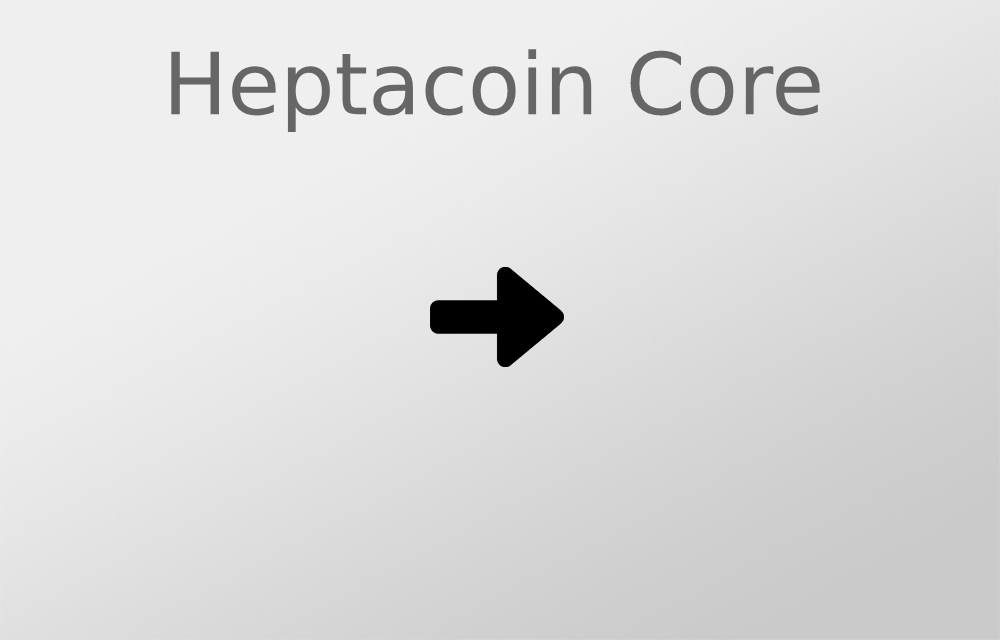
<style>
.page{position:relative;width:1000px;height:640px}
.page>*{position:absolute;margin:0}
.t1{font:85.7px "HelveticaNeue-Thin";color:#666666}
</style>
<div class="page">
<p class="t1" style="left:171px;top:49px;width:649px;height:84px">Heptacoin Core</p>
</div>
